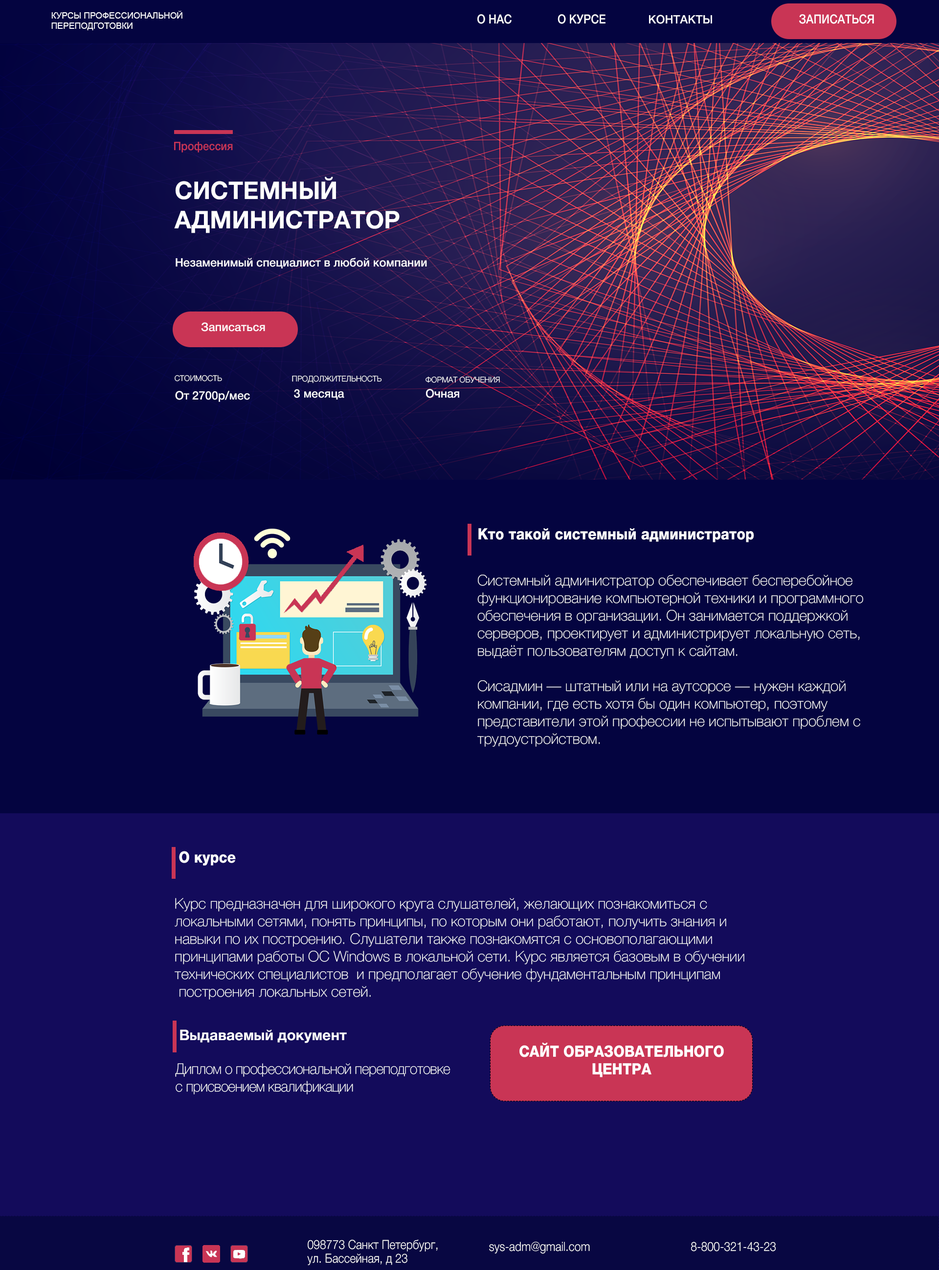
<style>
.page{position:relative;width:939px;height:1270px;background:#130b5b}
.page>*{position:absolute;margin:0}
.t1{font:8.8px "ArialMT";color:#ffffff;text-transform:uppercase}
.t2{font:12.6px "HelveticaNeueCyr-Medium";color:#ffffff;text-transform:uppercase;scale:0.88 1}
.t3{font:11.7px "HelveticaNeueCyr-Medium";color:#fefefe}
.t4{font:11.7px "HelveticaNeueCyr-Medium";color:#c93555;scale:0.92 1}
.t5{font:24.5px "HelveticaNeueCyr-Bold";color:#fefefe}
.t6{font:7.8px "HelveticaNeueCyr-Light";color:#fefefe;text-transform:uppercase}
.t7{font:15.7px "HelveticaNeueCyr-Heavy";color:#ffffff;scale:0.9 1}
.t8{font:14.7px "HelveticaNeueCyr-Thin";color:#ffffff}
.t9{font:14.7px "HelveticaNeueCyr-Bold";color:#ffffff}
.t10{font:15.7px "HelveticaNeueCyr-Heavy";color:#ffffff;text-transform:uppercase;scale:0.9 1}
.t11{font:14.7px "HelveticaNeueCyr-Thin";letter-spacing:-0.02em;color:#ffffff;scale:0.95 1}
.t12{font:12.6px "HelveticaNeueCyr-Light";color:#ffffff;scale:0.9 1}
.t13{font:12.6px "HelveticaNeueCyr-Light";color:#ffffff;text-transform:uppercase;scale:0.9 1}
</style>
<div class="page">
<p class="t1" style="left:51px;top:11px;width:131px;height:19px">Курсы профессиональной <br>переподготовки</p>
<p class="t2" style="left:477px;top:14px;width:35px;height:10px">О нас</p>
<p class="t2" style="left:557px;top:14px;width:48px;height:10px">О курсе</p>
<p class="t3" style="left:649px;top:15px;width:63px;height:9px">КОНТАКТЫ</p>
<p class="t2" style="left:799px;top:14px;width:75px;height:10px">Записаться</p>
<p class="t4" style="left:174px;top:142px;width:59px;height:11px">Профессия</p>
<p class="t5" style="left:174px;top:177px;width:226px;height:56px">СИСТЕМНЫЙ <br>АДМИНИСТРАТОР</p>
<p class="t3" style="left:176px;top:258px;width:251px;height:10px">Незаменимый специалист в любой компании</p>
<p class="t3" style="left:201px;top:322px;width:64px;height:10px">Записаться</p>
<p class="t6" style="left:175px;top:375px;width:47px;height:6px">Стоимость</p>
<p class="t6" style="left:292px;top:376px;width:90px;height:7px">ПРОДОЛЖИТЕЛЬНОСТЬ</p>
<p class="t6" style="left:425px;top:377px;width:75px;height:6px">Формат обучения</p>
<p class="t3" style="left:294px;top:389px;width:50px;height:11px">3 месяца</p>
<p class="t3" style="left:426px;top:389px;width:33px;height:9px">Очная</p>
<p class="t3" style="left:175px;top:391px;width:75px;height:11px">От 2700р/мес</p>
<p class="t7" style="left:478px;top:528px;width:276px;height:14px">Кто такой системный администратор</p>
<p class="t8" style="left:477px;top:575px;width:386px;height:172px">Системный администратор обеспечивает бесперебойное <br>функционирование компьютерной техники и программного<br>обеспечения в организации. Он занимается поддержкой <br>серверов, проектирует и администрирует локальную сеть, выдаёт пользователям доступ к сайтам.<br><br>Сисадмин — штатный или на аутсорсе — нужен каждой <br>компании, где есть хотя бы один компьютер, поэтому <br>представители этой профессии не испытывают проблем с <br>трудоустройством.</p>
<p class="t7" style="left:179px;top:851px;width:57px;height:15px">О курсе</p>
<p class="t8" style="left:175px;top:898px;width:569px;height:102px">Курс предназначен для широкого круга слушателей, желающих познакомиться с <br>локальными сетями, понять принципы, по которым они работают, получить знания и навыки по их построению. Слушатели также познакомятся с основополагающими <br>принципами работы ОС Windows в локальной сети. Курс является базовым в обучении <br>технических специалистов  и предполагает обучение фундаментальным принципам<br> построения локальных сетей.</p>
<p class="t9" style="left:180px;top:1029px;width:167px;height:14px">Выдаваемый документ</p>
<p class="t10" style="left:519px;top:1043px;width:205px;height:34px;text-align:center">Сайт образовательного центра</p>
<p class="t11" style="left:175px;top:1063px;width:275px;height:31px">Диплом о профессиональной переподготовке <br>с присвоением квалификации</p>
<p class="t12" style="left:307px;top:1240px;width:131px;height:26px">098773 Санкт Петербург,<br>ул. Бассейная, д 23</p>
<p class="t12" style="left:489px;top:1242px;width:101px;height:12px">sys-adm@gmail.com</p>
<p class="t13" style="left:691px;top:1242px;width:85px;height:9px">8-800-321-43-23</p>
</div>
